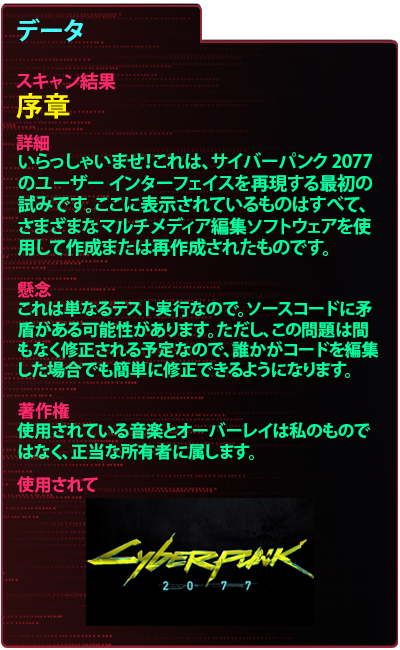
<style>
.page{position:relative;width:400px;height:650px}
.page>*{position:absolute;margin:0}
.t1{font:25px "KozGoPr6N-Bold";color:#43ffff}
.t2{font:18px "KozGoPr6N-Bold";color:#ff296d}
.t3{font:27px "KozGoPr6N-Bold";color:#fdf500}
.t4{font:17px "KozGoPr6N-Bold";color:#ff296d}
.t5{font:18px "KozGoPr6N-Bold";color:#00ff9f}
.t6{font:17px "KozGoPr6N-Bold";color:#00ff9f}
.t7{font:17px "KozGoPr6N-Regular";color:#ff296d}
</style>
<div class="page">
<p class="t1" style="left:17px;top:18px;width:67px;height:24px">データ</p>
<p class="t2" style="left:16px;top:72px;width:100px;height:18px">スキャン結果</p>
<p class="t3" style="left:16px;top:93px;width:54px;height:26px">序章</p>
<p class="t4" style="left:16px;top:134px;width:33px;height:17px">詳細</p>
<p class="t5" style="left:18px;top:152px;width:354px;height:104px">いらっしゃいませ！これは、サイバーパンク 2077 のユーザー インターフェイスを再現する最初の試みです。ここに表示されているものはすべて、さまざまなマルチメディア編集ソフトウェアを使用して作成または再作成されたものです。</p>
<p class="t4" style="left:18px;top:281px;width:33px;height:17px">懸念</p>
<p class="t6" style="left:18px;top:300px;width:361px;height:78px">これは単なるテスト実行なので。ソースコードに矛盾がある可能性があります。ただし、この問題は間もなく修正される予定なので、誰かがコードを編集した場合でも簡単に修正できるようになります。</p>
<p class="t4" style="left:18px;top:402px;width:51px;height:17px">著作権</p>
<p class="t6" style="left:17px;top:422px;width:354px;height:38px">使用されている音楽とオーバーレイは私のものではなく、正当な所有者に属します。</p>
<p class="t7" style="left:17px;top:476px;width:81px;height:17px"><span class="t4">使用されて</span>いる音楽とオーバーレイは私のものではなく、正当な所有者に属します。</p>
</div>
